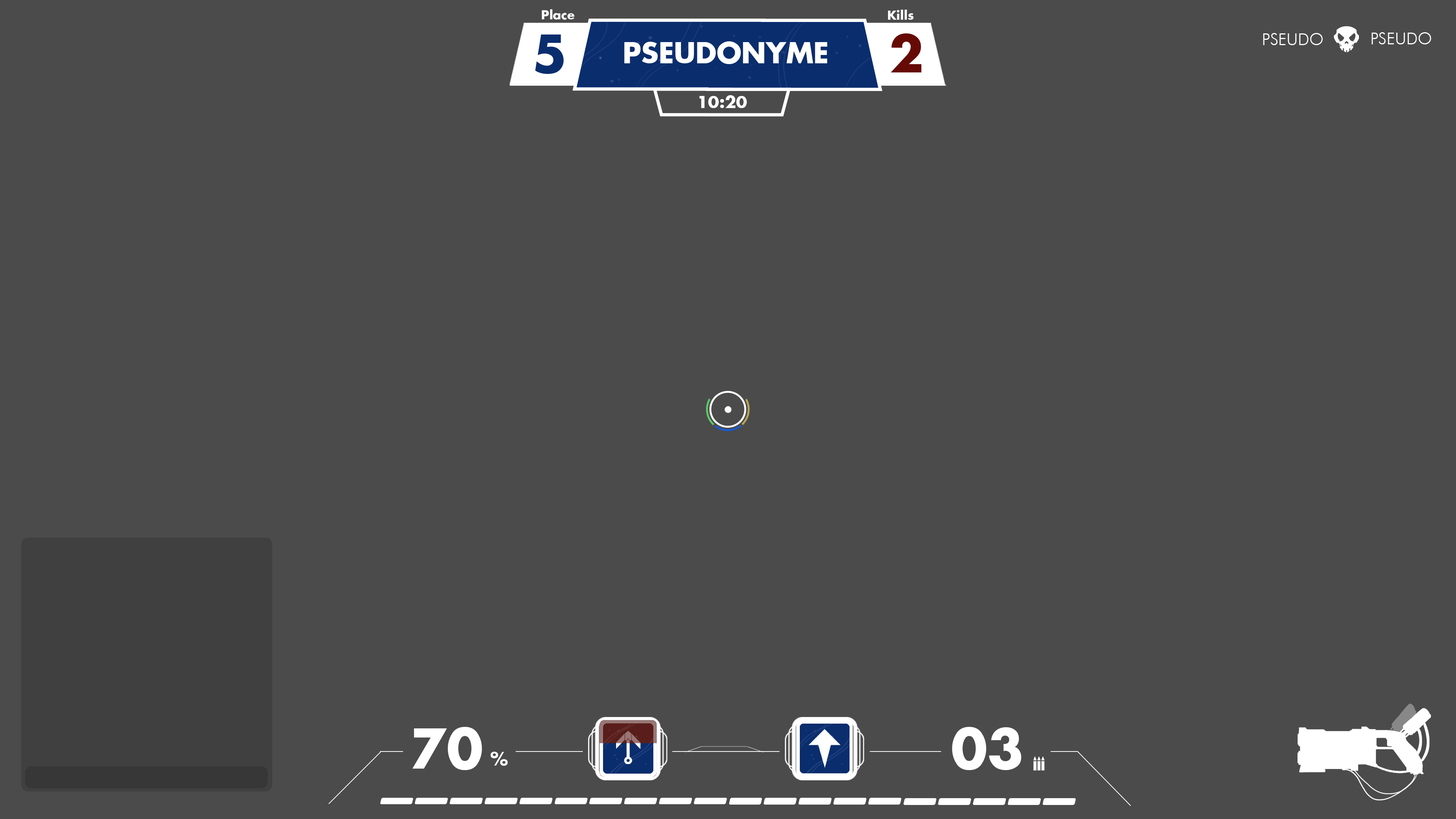
<style>
.page{position:relative;width:1456px;height:819px;background:#4b4b4b}
.page>*{position:absolute;margin:0}
.t1{font:12.2px "Futura-Bold";color:#ffffff}
.t2{font:50.2px "Futura-Bold";color:#0a2d6e;text-transform:uppercase}
.t3{font:27.9px "Futura-Bold";color:#ffffff;text-transform:uppercase}
.t4{font:50.2px "Futura-Bold";color:#660a05;text-transform:uppercase}
.t5{font:16.4px "FuturaBT-Light";color:#ffffff;text-transform:uppercase}
.t6{font:16.3px "Futura-Bold";color:#ffffff;text-transform:uppercase}
.t7{font:53.2px "Futura-Bold";color:#ffffff;text-transform:uppercase}
.t8{font:18.2px "Futura-Bold";color:#ffffff;text-transform:uppercase}
</style>
<div class="page">
<p class="t1" style="left:542px;top:9px;width:32px;height:11px">Place</p>
<p class="t1" style="left:888px;top:9px;width:26px;height:11px">Kills</p>
<p class="t2" style="left:535px;top:35px;width:29px;height:39px">5</p>
<p class="t3" style="left:624px;top:41px;width:203px;height:23px">Pseudonyme</p>
<p class="t4" style="left:891px;top:33px;width:30px;height:39px">2</p>
<p class="t5" style="left:1263px;top:33px;width:60px;height:12px">pseudo</p>
<p class="t5" style="left:1371px;top:32px;width:60px;height:12px">pseudo</p>
<p class="t6" style="left:699px;top:95px;width:48px;height:13px">10:20</p>
<p class="t7" style="left:412px;top:727px;width:70px;height:43px">70</p>
<p class="t7" style="left:952px;top:727px;width:69px;height:43px">03</p>
<p class="t8" style="left:490px;top:751px;width:18px;height:15px">%</p>
</div>
